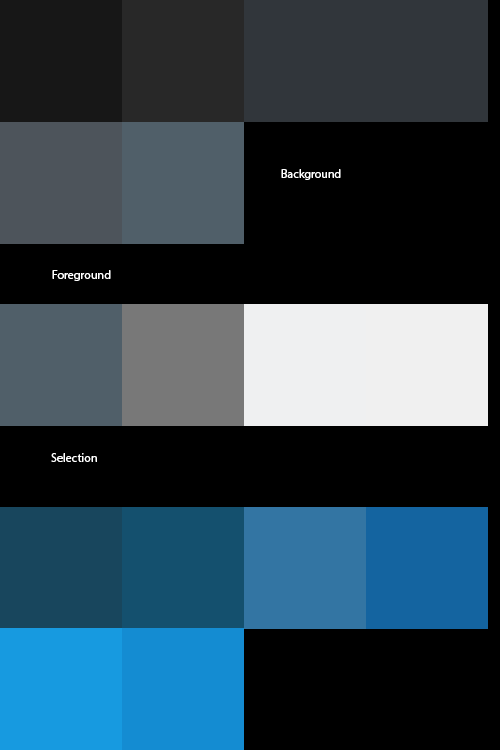
<style>
.page{position:relative;width:500px;height:750px;background:#000000}
.page>*{position:absolute;margin:0}
.t1{font:12px "MyriadPro-Regular";color:#ffffff}
</style>
<div class="page">
<p class="t1" style="left:281px;top:169px;width:60px;height:11px">Background</p>
<p class="t1" style="left:52px;top:270px;width:59px;height:11px">Foreground</p>
<p class="t1" style="left:51px;top:453px;width:46px;height:9px">Selection</p>
</div>
